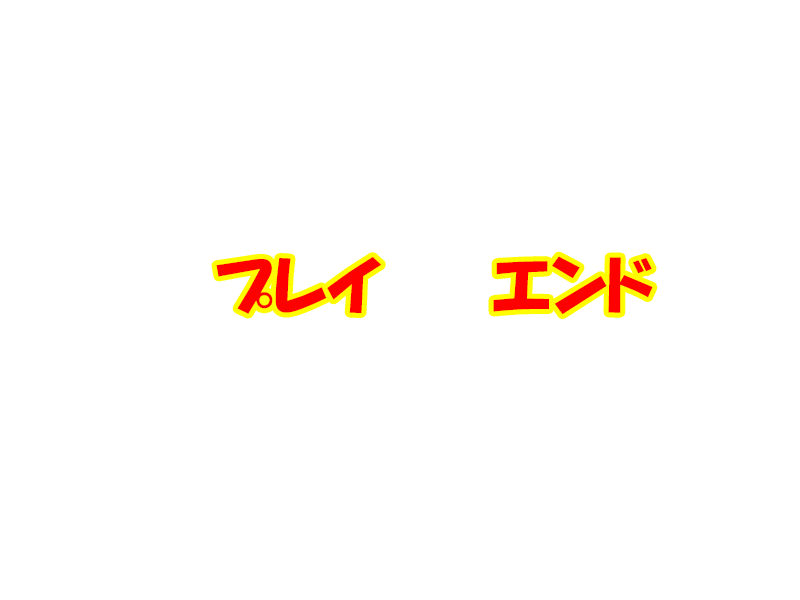
<style>
.page{position:relative;width:800px;height:600px;background:#ffffff}
.page>*{position:absolute;margin:0}
.t1{font:64px "HGPSoeiKakupoptai";color:#ff0000}
</style>
<div class="page">
<p class="t1" style="left:216px;top:257px;width:165px;height:57px">プレイ</p>
<p class="t1" style="left:493px;top:256px;width:160px;height:59px">エンド</p>
</div>
